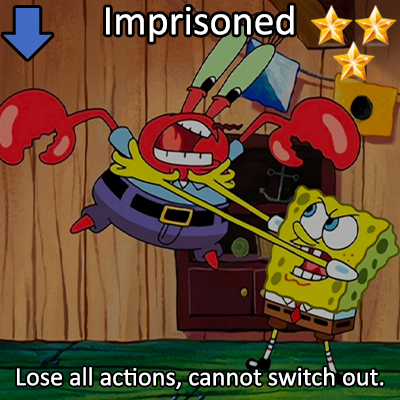
<style>
.page{position:relative;width:400px;height:400px}
.page>*{position:absolute;margin:0}
.t1{font:72px "Calibri";color:#ffffff}
.t2{font:45px "Calibri";color:#ffffff}
</style>
<div class="page">
<p class="t1" style="left:106px;top:5px;width:188px;height:37px">Imprisoned</p>
<p class="t2" style="left:17px;top:367px;width:367px;height:22px">Lose all actions, cannot switch out.</p>
</div>
